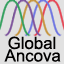
<style>
.page{position:relative;width:64px;height:64px;background:#e1e1e1}
.page>*{position:absolute;margin:0}
.t1{font:16.8px "ArialMT";color:#010000}
</style>
<div class="page">
<p class="t1" style="left:8px;top:36px;width:48px;height:14px">Global</p>
<p class="t1" style="left:4px;top:49px;width:57px;height:13px">Ancova</p>
</div>
